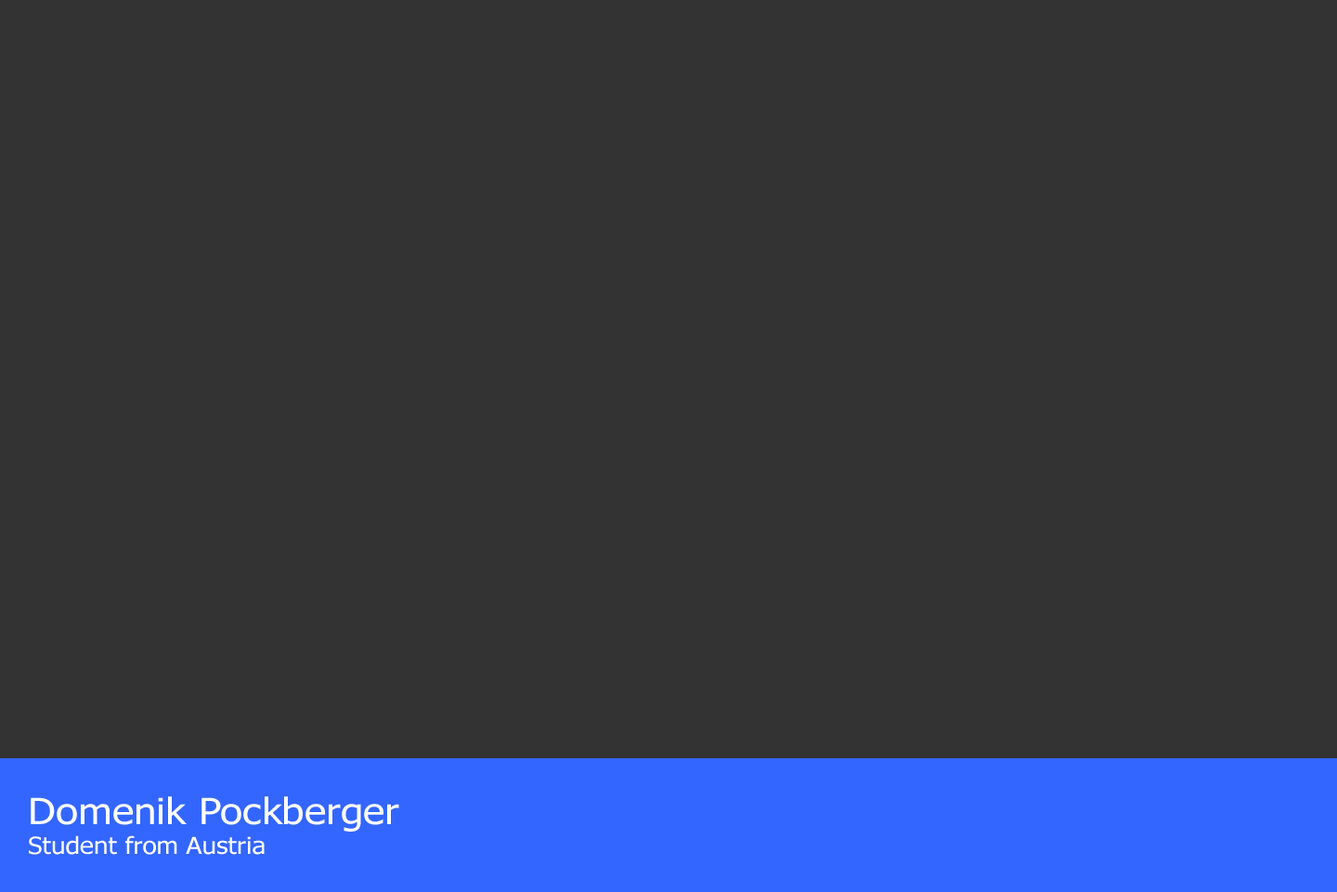
<style>
.page{position:relative;width:1337px;height:892px;background:#333333}
.page>*{position:absolute;margin:0}
.t1{font:23.1px/29.7px "Tahoma";color:#ffffff;scale:1.12 1}
.t2{font:36.3px/39.6px "Tahoma";color:#ffffff;scale:1.12 1}
</style>
<div class="page">
<p class="t1" style="left:29px;top:796px;width:370px;height:58px"><span class="t2">Domenik Pockberger<br></span>Student from Austria</p>
</div>
